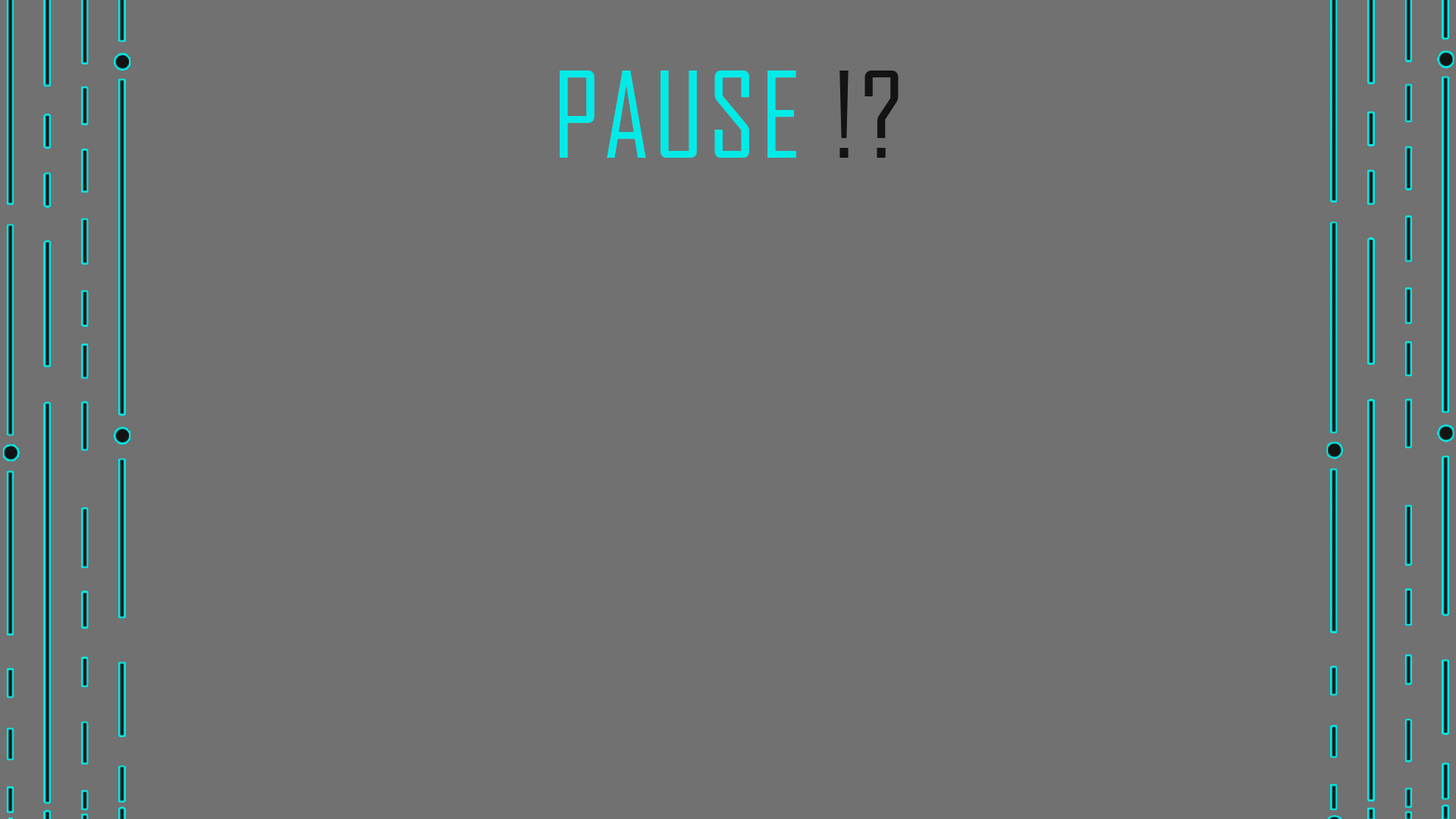
<style>
.page{position:relative;width:1456px;height:819px;background:#717171}
.page>*{position:absolute;margin:0}
.t1{font:113.7px "AgencyFB-Reg";letter-spacing:0.04em;color:#00ebe8}
.t2{font:113.7px "AgencyFB-Reg";letter-spacing:0.04em;color:#131313}
</style>
<div class="page">
<p class="t1" style="left:560px;top:71px;width:339px;height:87px">PAUSE <span class="t2">!?</span></p>
</div>
